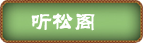
<style>
.page{position:relative;width:143px;height:43px}
.page>*{position:absolute;margin:0}
.t1{font:25px "STLiti";color:#ffffff;font-weight:bold;scale:0.85 1}
</style>
<div class="page">
<p class="t1" style="left:31px;top:13px;width:64px;height:18px">听松阁</p>
</div>
